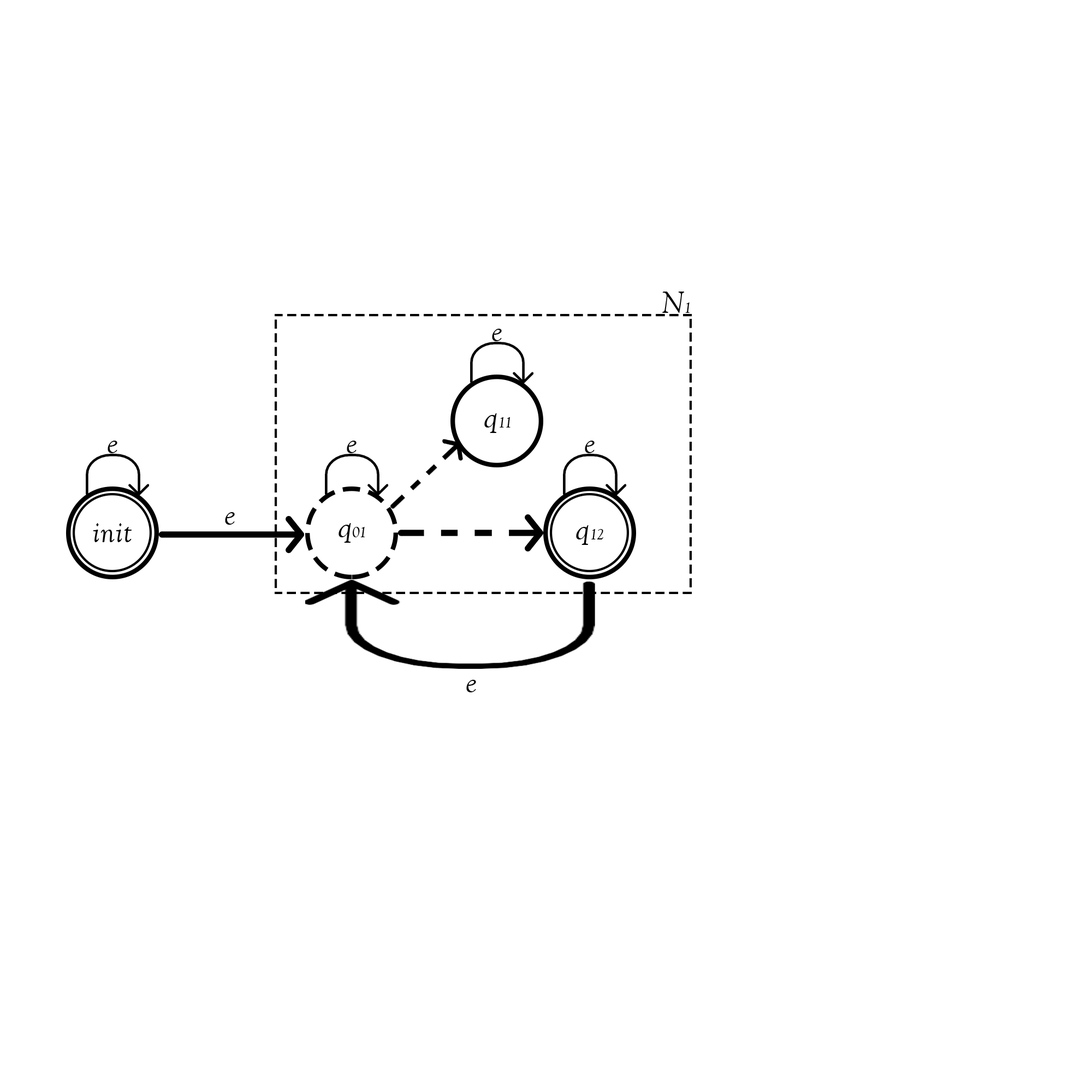
<style>
.page{position:relative;width:1092px;height:1092px;background:#ffffff}
.page>*{position:absolute;margin:0}
.t1{font:31.8px "GoudyOldStyleT-Italic";color:#020202}
.t2{font:15.9px "GoudyOldStyleT-Italic";color:#020202}
</style>
<div class="page">
<p class="t1" style="left:662px;top:292px;width:28px;height:21px">N<span class="t2">1</span></p>
<p class="t1" style="left:492px;top:329px;width:10px;height:12px">e</p>
<p class="t2" style="left:484px;top:413px;width:27px;height:20px"><span class="t1">q</span>11</p>
<p class="t1" style="left:108px;top:441px;width:9px;height:12px">e</p>
<p class="t1" style="left:347px;top:441px;width:10px;height:12px">e</p>
<p class="t1" style="left:585px;top:441px;width:10px;height:12px">e</p>
<p class="t1" style="left:225px;top:512px;width:10px;height:13px">e</p>
<p class="t1" style="left:93px;top:523px;width:39px;height:19px">init</p>
<p class="t2" style="left:339px;top:523px;width:26px;height:20px"><span class="t1">q</span>01</p>
<p class="t2" style="left:576px;top:525px;width:27px;height:20px"><span class="t1">q</span>12</p>
<p class="t1" style="left:466px;top:680px;width:10px;height:12px">e</p>
</div>
